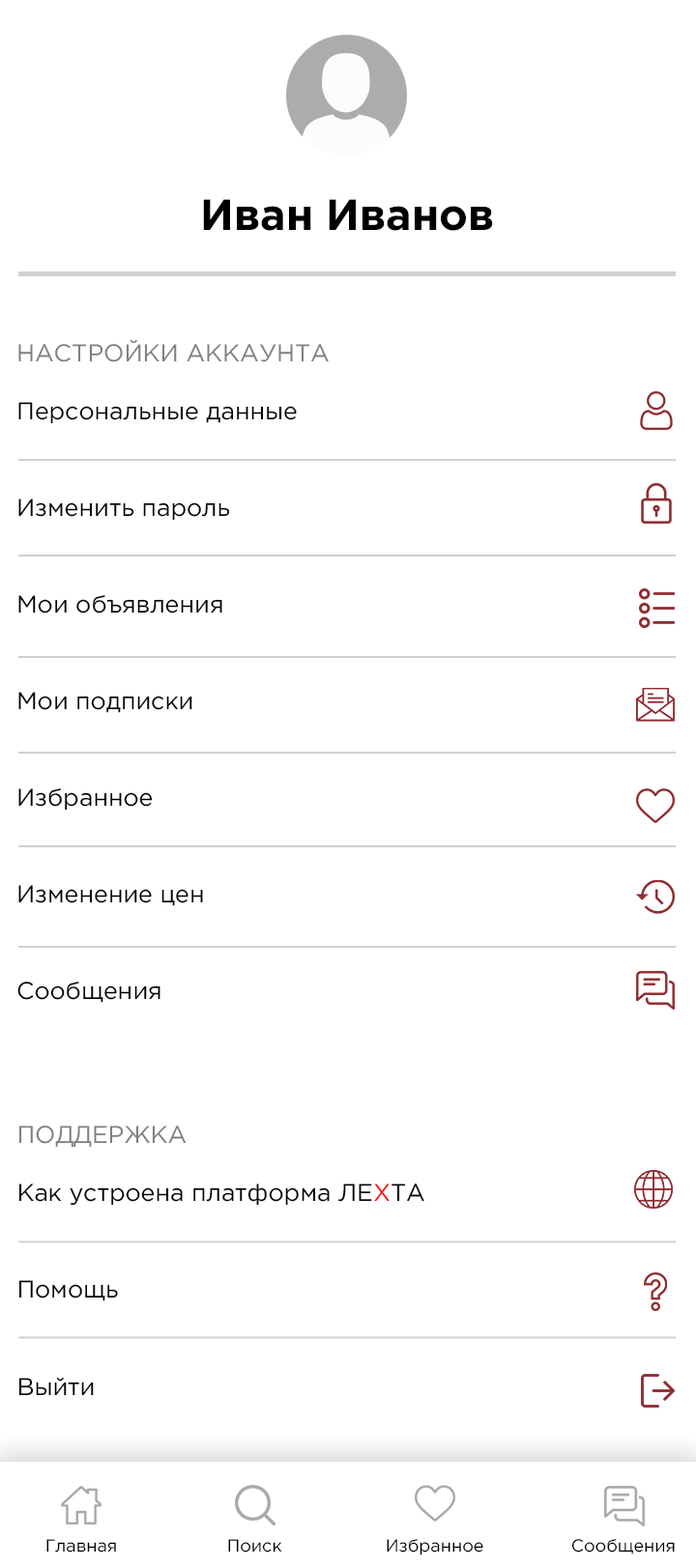
<style>
.page{position:relative;width:696px;height:1568px;background:#ffffff}
.page>*{position:absolute;margin:0}
.t1{font:43.5px "GothamPro-Bold";color:#000000}
.t2{font:24.2px "GothamPro";color:#808080}
.t3{font:24.2px/96.6px "GothamPro";color:#000000}
.t4{font:24.2px/96.7px "GothamPro";color:#000000}
.t5{font:24.2px/96.7px "GothamPro";color:#ff0000}
.t6{font:17.4px "GothamPro";color:#000000}
</style>
<div class="page">
<p class="t1" style="left:203px;top:199px;width:290px;height:32px">Иван Иванов</p>
<p class="t2" style="left:18px;top:339px;width:310px;height:23px">НАСТРОЙКИ АККАУНТА</p>
<p class="t3" style="left:17px;top:402px;width:280px;height:601px">Персональные данные<br>Изменить пароль<br>Мои объявления<br>Мои подписки<br>Избранное<br>Изменение цен<br>Сообщения</p>
<p class="t2" style="left:18px;top:1126px;width:168px;height:22px">ПОДДЕРЖКА</p>
<p class="t4" style="left:18px;top:1183px;width:406px;height:213px">Как устроена платформа ЛЕ<span class="t5">Х</span>ТА<br>Помощь<br>Выйти</p>
<p class="t6" style="left:46px;top:1539px;width:70px;height:14px">Главная</p>
<p class="t6" style="left:228px;top:1539px;width:54px;height:14px">Поиск</p>
<p class="t6" style="left:386px;top:1539px;width:97px;height:16px">Избранное</p>
<p class="t6" style="left:571px;top:1539px;width:103px;height:15px">Сообщения</p>
</div>
